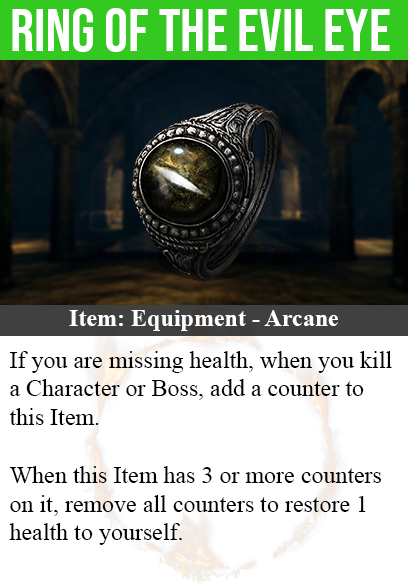
<style>
.page{position:relative;width:408px;height:585px;background:#ffffff}
.page>*{position:absolute;margin:0}
.t1{font:60px "BebasNeue-Regular";color:#ffffff}
.t2{font:24px "TimesNewRomanPS-BoldMT";color:#ffffff}
.t3{font:24px "TimesNewRomanPSMT";color:#000000}
</style>
<div class="page">
<p class="t1" style="left:12px;top:8px;width:378px;height:44px">ring of the evil eye</p>
<p class="t2" style="left:69px;top:310px;width:269px;height:21px">Item: Equipment - Arcane</p>
<p class="t3" style="left:9px;top:351px;width:383px;height:194px">If you are missing health, when you kill<br>a Character or Boss, add a counter to<br>this Item.<br><br>When this Item has 3 or more counters<br>on it, remove all counters to restore 1<br>health to yourself.</p>
</div>
